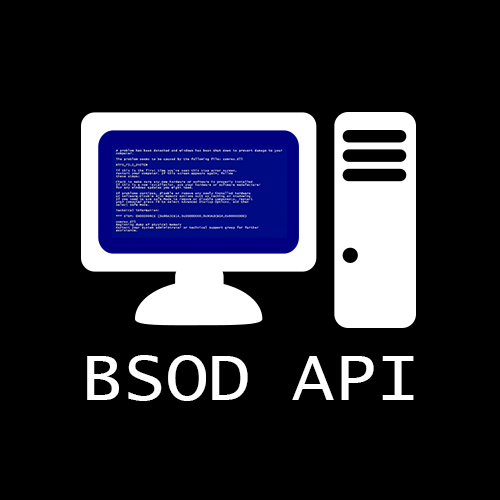
<style>
.page{position:relative;width:500px;height:500px;background:#000000}
.page>*{position:absolute;margin:0}
.t1{font:70px "LucidaConsole";color:#ffffff}
</style>
<div class="page">
<p class="t1" style="left:87px;top:355px;width:327px;height:46px">BSOD API</p>
</div>
